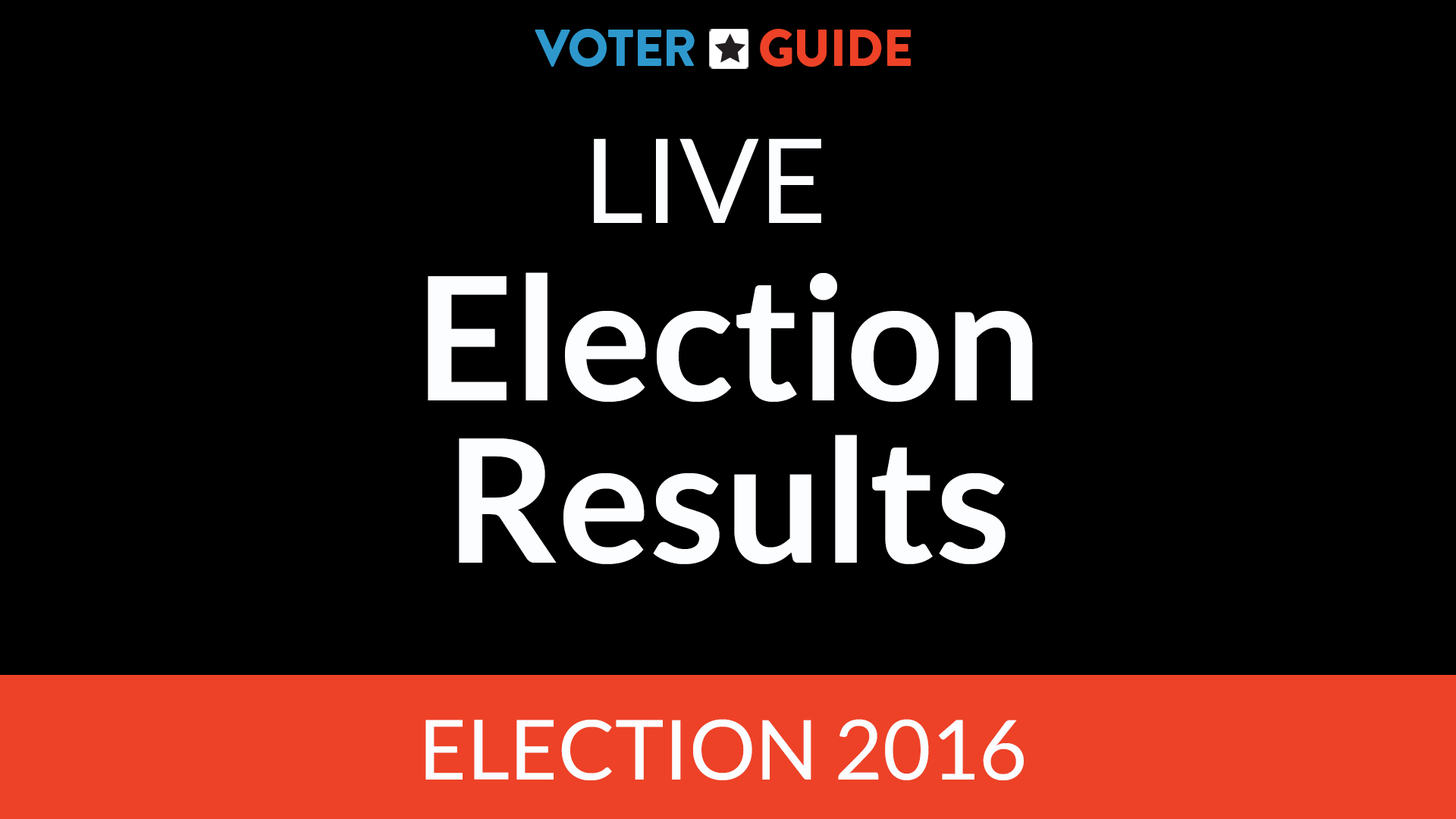
<style>
.page{position:relative;width:1456px;height:819px;background:#000000}
.page>*{position:absolute;margin:0}
.t1{font:51.7px "BrandonGrotesque-Black";letter-spacing:-0.02em;color:#2e98cc}
.t2{font:51.7px "BrandonGrotesque-Black";letter-spacing:-0.02em;color:#ed4227}
.t3{font:116.9px "Lato-Regular";color:#fbfdfe}
.t4{font:171.5px/161.8px "Lato-Bold";color:#fbfdfe}
.t5{font:83px "Lato-Regular";color:#fbfdfe}
</style>
<div class="page">
<p class="t1" style="left:535px;top:29px;width:376px;height:38px">VOTER      <span class="t2">GUIDE</span></p>
<p class="t3" style="left:594px;top:139px;width:227px;height:84px">LIVE</p>
<p class="t4" style="left:428px;top:272px;width:605px;height:292px;text-align:center">Election<br>Results</p>
<p class="t5" style="left:425px;top:719px;width:599px;height:61px">ELECTION 2016</p>
</div>
